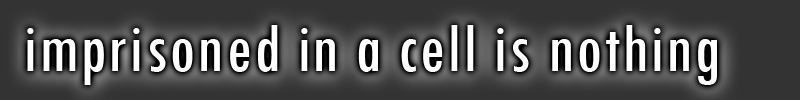
<style>
.page{position:relative;width:800px;height:100px;background:#333333}
.page>*{position:absolute;margin:0}
.t1{font:72px "TwCenMT-Condensed";letter-spacing:0.025em;color:#ffffff}
</style>
<div class="page">
<p class="t1" style="left:27px;top:25px;width:690px;height:60px">imprisoned in a cell is nothing</p>
</div>
